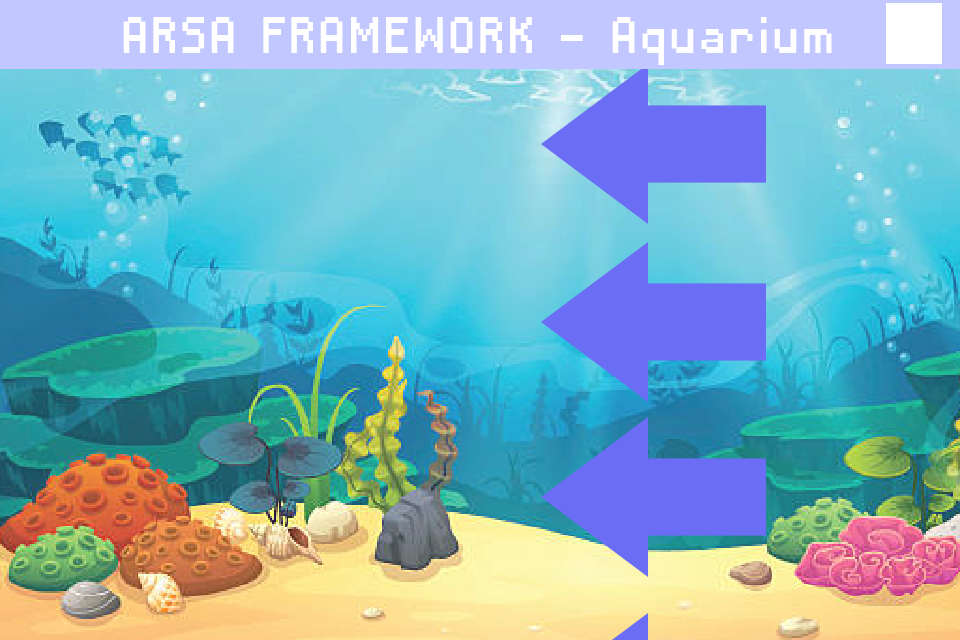
<style>
.page{position:relative;width:960px;height:640px}
.page>*{position:absolute;margin:0}
.t1{font:67.1px "DisposableDroidBB";color:#ffffff;scale:0.91 1}
</style>
<div class="page">
<p class="t1" style="left:123px;top:17px;width:709px;height:48px">ARSA FRAMEWORK - Aquarium</p>
</div>
